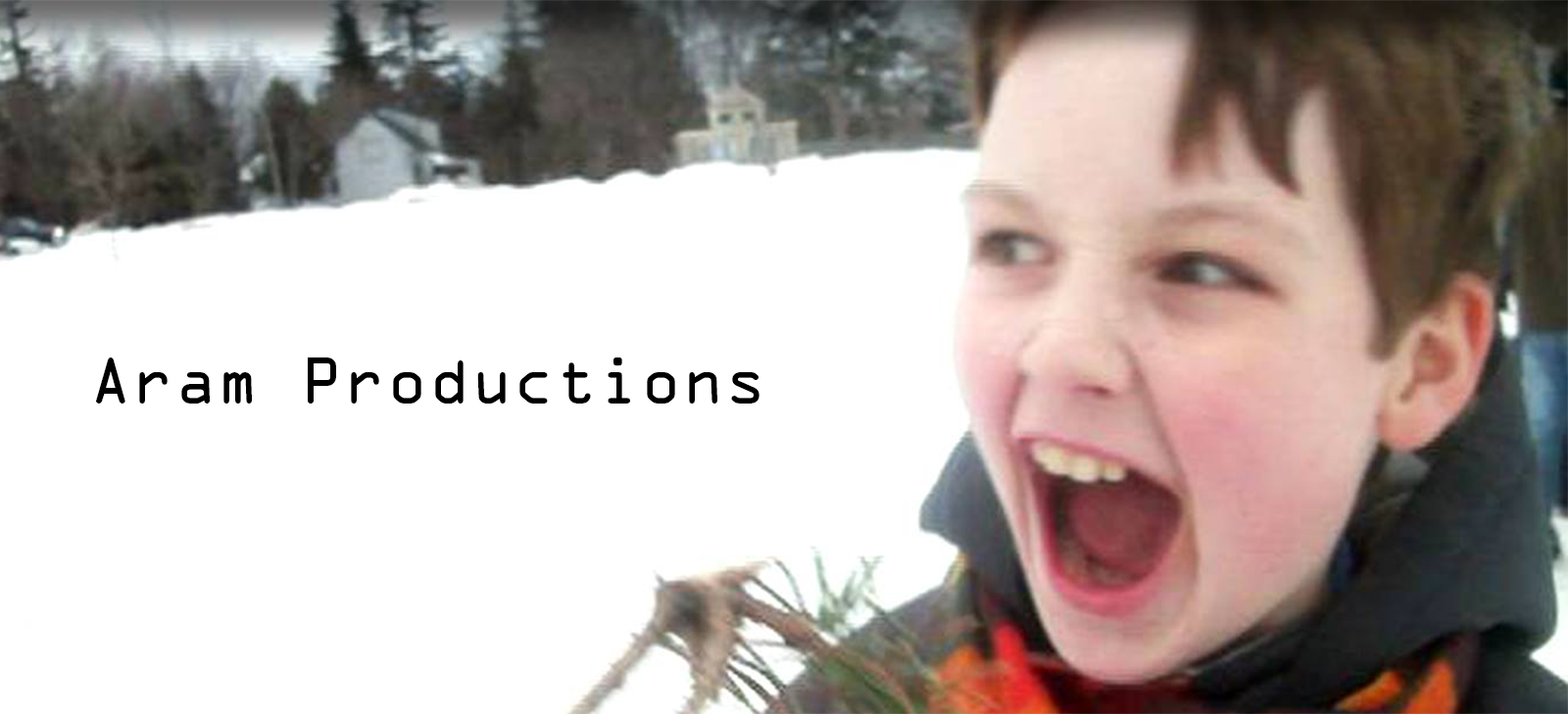
<style>
.page{position:relative;width:1568px;height:714px;background:#ffffff}
.page>*{position:absolute;margin:0}
.t1{font:58.8px "OCRAStd";color:#000000}
</style>
<div class="page">
<p class="t1" style="left:96px;top:358px;width:664px;height:46px">Aram Productions</p>
</div>
